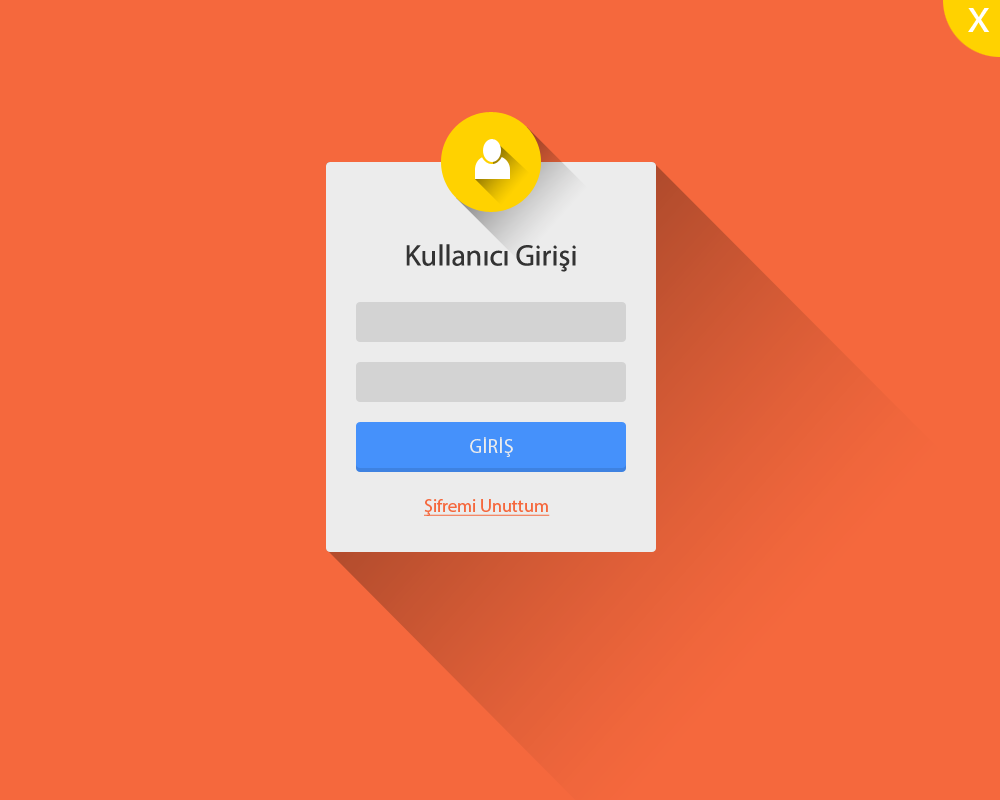
<style>
.page{position:relative;width:1000px;height:800px;background:#f5683d}
.page>*{position:absolute;margin:0}
.t1{font:47.9px "MyriadPro-Regular";color:#ffffff}
.t2{font:29.8px "MyriadPro-Regular";color:#333333}
.t3{font:20px "MyriadPro-Regular";color:#ececec;text-transform:uppercase}
.t4{font:18px "MyriadPro-Regular";color:#f5683d;text-decoration:underline}
</style>
<div class="page">
<p class="t1" style="left:968px;top:8px;width:22px;height:24px">x</p>
<p class="t2" style="left:406px;top:244px;width:170px;height:28px">Kullanıcı Girişi</p>
<p class="t3" style="left:470px;top:437px;width:43px;height:20px">GİRİŞ</p>
<p class="t4" style="left:424px;top:499px;width:126px;height:17px">Şifremi Unuttum</p>
</div>
